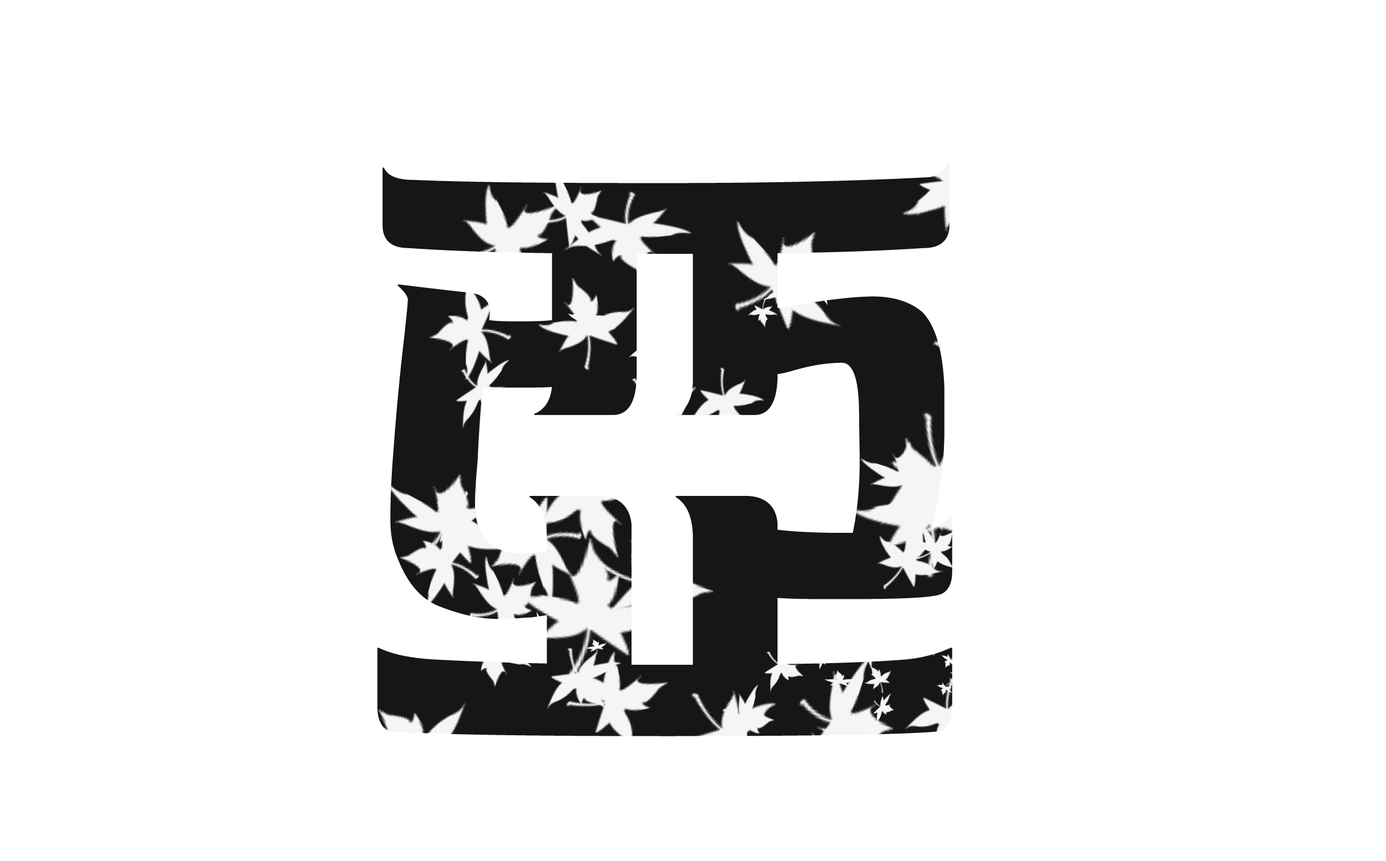
<style>
.page{position:relative;width:1386px;height:861px;background:#ffffff}
.page>*{position:absolute;margin:0}
.t1{font:636.8px "DFPOP2Std-W9";color:#161616;font-weight:bold}
</style>
<div class="page">
<p class="t1" style="left:377px;top:162px;width:575px;height:574px">亞</p>
</div>
